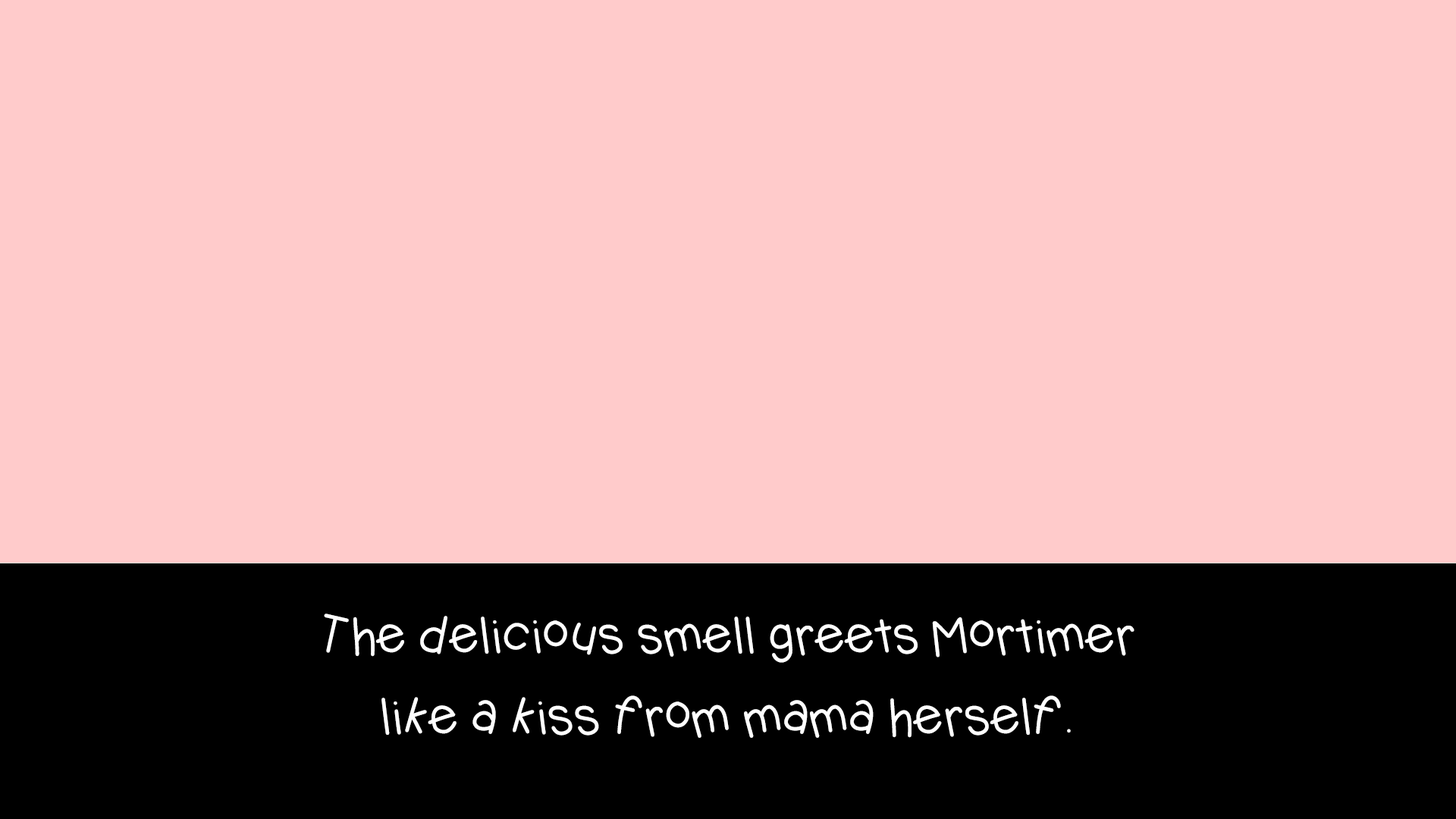
<style>
.page{position:relative;width:1456px;height:819px;background:#ffcbcb}
.page>*{position:absolute;margin:0}
.t1{font:49.1px/81.1px "KBJellybean";letter-spacing:-0.04em;color:#ffffff}
</style>
<div class="page">
<p class="t1" style="left:324px;top:613px;width:810px;height:125px;text-align:center">The delicious smell greets Mortimer <br>like a kiss from mama herself.</p>
</div>
